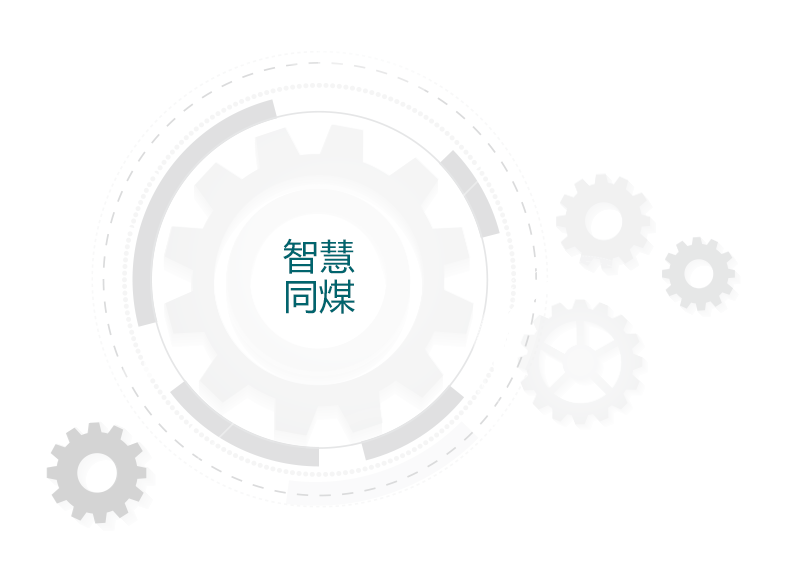
<style>
.page{position:relative;width:794px;height:582px;background:#ffffff}
.page>*{position:absolute;margin:0}
.t1{font:36px/40px "MicrosoftYaHei";color:#01646d}
</style>
<div class="page">
<p class="t1" style="left:283px;top:238px;width:72px;height:76px;text-align:center">智慧<br>同煤</p>
</div>
